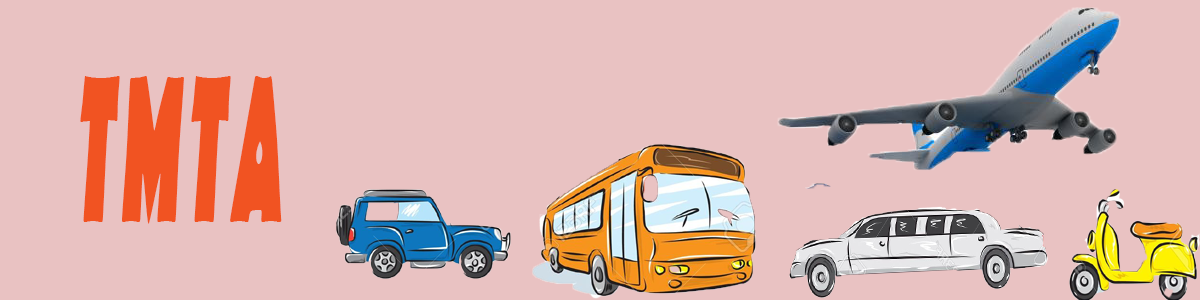
<style>
.page{position:relative;width:1200px;height:300px;background:#e9c2c2}
.page>*{position:absolute;margin:0}
.t1{font:210px "BerlinSansFB-Bold";letter-spacing:0.1em;color:#f15322;font-style:italic;scale:0.33 1}
</style>
<div class="page">
<p class="t1" style="left:80px;top:76px;width:202px;height:148px">TMTA</p>
</div>
